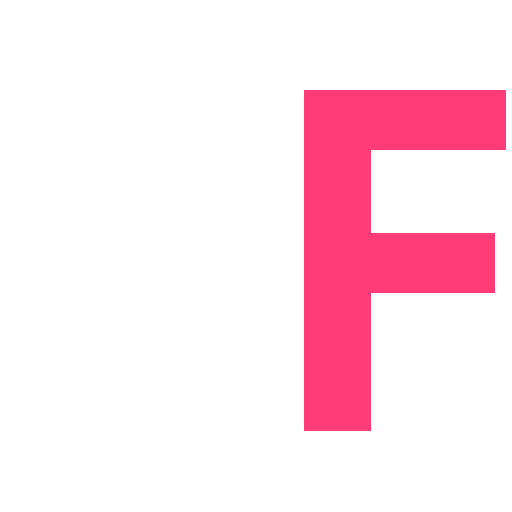
<style>
.page{position:relative;width:512px;height:512px;background:#ffffff}
.page>*{position:absolute;margin:0}
.t1{font:485.3px "PTSans-Bold";color:#ff3c78}
</style>
<div class="page">
<p class="t1" style="left:304px;top:90px;width:202px;height:341px">F</p>
</div>
